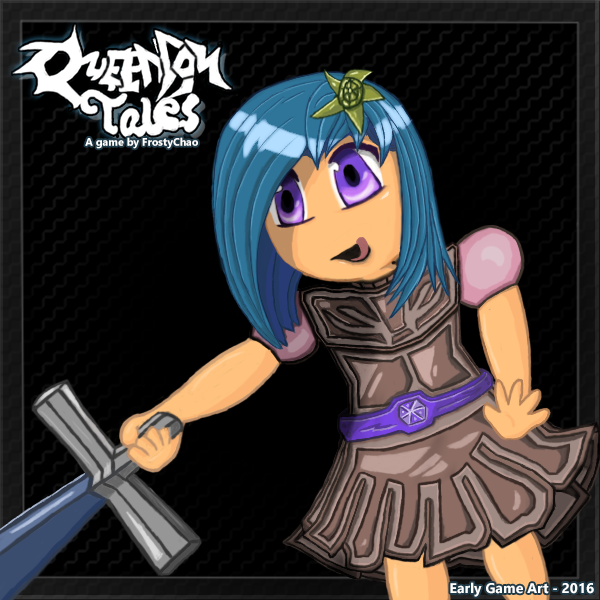
<style>
.page{position:relative;width:600px;height:600px;background:#000000}
.page>*{position:absolute;margin:0}
.t1{font:10.7px "Gadugi-Bold";color:#ffffff}
.t2{font:14px "Gadugi-Bold";color:#ffffff}
</style>
<div class="page">
<p class="t1" style="left:85px;top:137px;width:113px;height:12px">A game by FrostyChao</p>
<p class="t2" style="left:450px;top:582px;width:144px;height:15px">Early Game Art - 2016</p>
</div>
